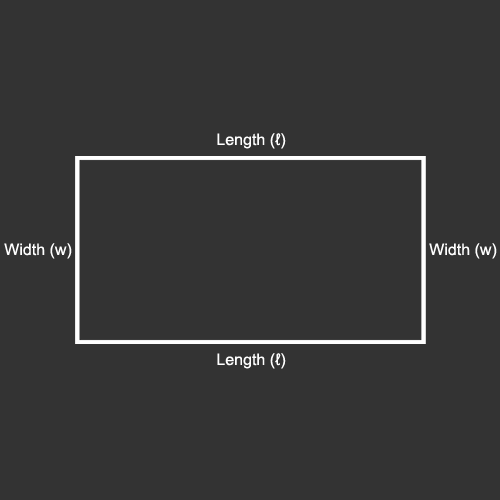
<style>
.page{position:relative;width:500px;height:500px;background:#333333}
.page>*{position:absolute;margin:0}
.t1{font:16px "ArialMT";color:#ffffff}
</style>
<div class="page">
<p class="t1" style="left:217px;top:133px;width:69px;height:16px">Length (ℓ)</p>
<p class="t1" style="left:4px;top:243px;width:68px;height:16px">Width (w)</p>
<p class="t1" style="left:429px;top:243px;width:68px;height:16px">Width (w)</p>
<p class="t1" style="left:217px;top:353px;width:69px;height:16px">Length (ℓ)</p>
</div>
